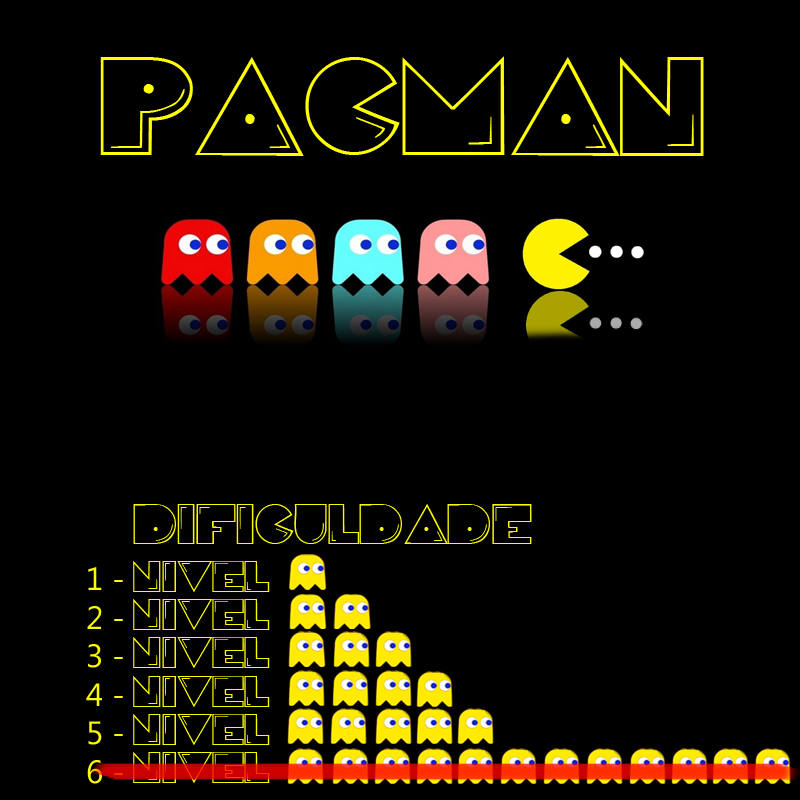
<style>
.page{position:relative;width:800px;height:800px;background:#000000}
.page>*{position:absolute;margin:0}
.t1{font:100px "PacFont";color:#ffff00}
.t2{font:40px "PacFont";color:#fbfb00}
.t3{font:32.1px "MicrosoftNewTaiLue";color:#fbfb00}
.t4{font:31.9px "PacFont";color:#fbfb00}
</style>
<div class="page">
<p class="t1" style="left:100px;top:56px;width:604px;height:100px">PACMAN</p>
<p class="t2" style="left:133px;top:504px;width:399px;height:40px">DIFICULDADE</p>
<p class="t3" style="left:86px;top:567px;width:37px;height:217px">1 -<br>2 -<br>3 -<br>4 -<br>5 -<br>6 -</p>
<p class="t4" style="left:133px;top:561px;width:137px;height:222px">NIVEL <br>NIVEL <br>NIVEL <br>NIVEL <br>NIVEL <br>NIVEL</p>
</div>
